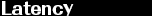
<style>
.page{position:relative;width:152px;height:16px;background:#000000}
.page>*{position:absolute;margin:0}
.t1{font:17.2px "FolkPro-Heavy";color:#ffffff}
</style>
<div class="page">
<p class="t1" style="left:2px;top:1px;width:72px;height:16px">Latency</p>
<p class="t1" style="left:2px;top:0px;width:72px;height:16px">Latency</p>
</div>
